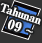
<style>
.page{position:relative;width:42px;height:43px;background:#333333}
.page>*{position:absolute;margin:0}
.t1{font:11px/14px "RyuminPro-ExBold";letter-spacing:-0.08em;color:#ffffff;font-weight:bold}
.t2{font:13px/14px "RyuminPro-ExBold";color:#ffffff;font-weight:bold}
.t3{font:13px/14px "WineArial";color:#ffffff;font-weight:bold}
</style>
<div class="page">
<p class="t1" style="left:0px;top:3px;width:41px;height:30px;text-align:center;rotate:19deg">Tahunan<br><span class="t2">  09 </span><span class="t3">~</span></p>
</div>
